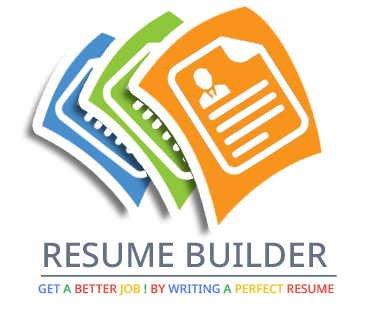
<style>
.page{position:relative;width:373px;height:316px;background:#ffffff}
.page>*{position:absolute;margin:0}
.t1{font:34px "NotoSans-Medium";color:#657284;text-decoration:underline}
.t2{font:12px "NotoSans-Medium";color:#4e7cf3}
.t3{font:12px "NotoSans-Medium";color:#35aa53}
.t4{font:12px "NotoSans-Medium";color:#e84639}
.t5{font:12px "NotoSans-Medium";color:#f8bf13}
</style>
<div class="page">
<p class="t1" style="left:41px;top:242px;width:296px;height:35px">RESUME BUILDER</p>
<p class="t2" style="left:38px;top:284px;width:296px;height:12px">GET <span class="t3">A </span><span class="t4">BETTER </span><span class="t5">JOB</span><span class="t3"> ! </span><span class="t4">BY </span>WRITING<span class="t3"> A </span><span class="t5">PERFECT </span><span class="t4">RESUME</span></p>
</div>
